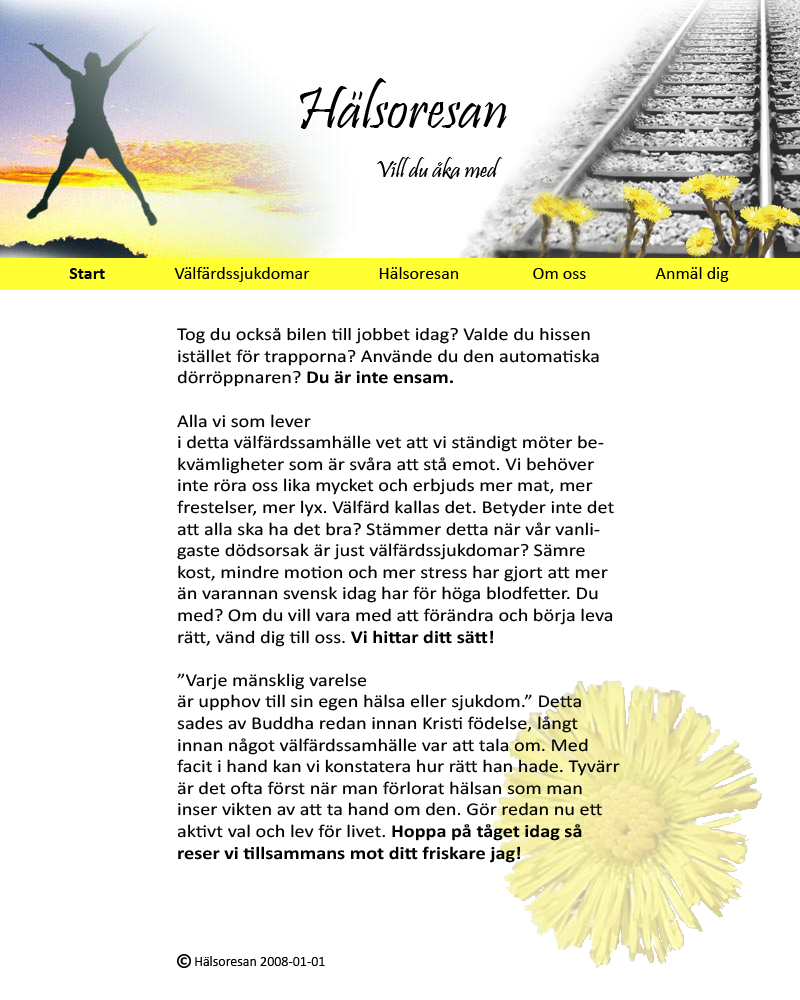
<style>
.page{position:relative;width:800px;height:1000px;background:#ffffff}
.page>*{position:absolute;margin:0}
.t1{font:18px "Calibri";color:#000000;scale:1.13 1}
.t2{font:18px "Calibri-Bold";color:#000000;scale:1.13 1}
</style>
<div class="page">
<p class="t1" style="left:177px;top:328px;width:443px;height:535px">Tog du också bilen till jobbet idag? Valde du hissen istället för trapporna? Använde du den automatiska dörröppnaren? <span class="t2">Du är inte ensam. <br><br></span>Alla vi som lever <br>i detta välfärdssamhälle vet att vi ständigt möter bekvämligheter som är svåra att stå emot. Vi behöver inte röra oss lika mycket och erbjuds mer mat, mer frestelser, mer lyx. Välfärd kallas det. Betyder inte det att alla ska ha det bra? Stämmer detta när vår vanligaste dödsorsak är just välfärdssjukdomar? Sämre kost, mindre motion och mer stress har gjort att mer än varannan svensk idag har för höga blodfetter. Du med? Om du vill vara med att förändra och börja leva rätt, vänd dig till oss. <span class="t2">Vi hittar ditt sätt!<br><br></span>”Varje mänsklig varelse <br>är upphov till sin egen hälsa eller sjukdom.” Detta sades av Buddha redan innan Kristi födelse, långt innan något välfärdssamhälle var att tala om. Med facit i hand kan vi konstatera hur rätt han hade. Tyvärr är det ofta först när man förlorat hälsan som man inser vikten av att ta hand om den. Gör redan nu ett aktivt val och lev för livet. <span class="t2">Hoppa på tåget idag så reser vi tillsammans mot ditt friskare jag!</span></p>
</div>
